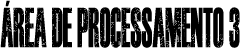
<style>
.page{position:relative;width:240px;height:48px;background:#000000}
.page>*{position:absolute;margin:0}
.t1{font:56.2px "Haettenschweiler";color:#000000;scale:0.51 1}
</style>
<div class="page">
<p class="t1" style="left:0px;top:0px;width:240px;height:48px">ÁREA DE PROCESSAMENTO 3</p>
</div>
